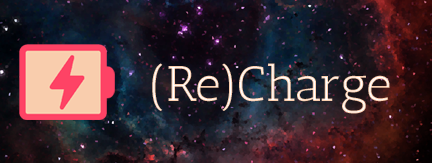
<style>
.page{position:relative;width:432px;height:163px}
.page>*{position:absolute;margin:0}
.t1{font:50px "AnticSlab-Regular"}
</style>
<div class="page">
<p class="t1" style="left:152px;top:63px;width:238px;height:51px">(Re)Charge</p>
</div>
